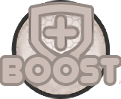
<style>
.page{position:relative;width:121px;height:99px;background:#ffffff}
.page>*{position:absolute;margin:0}
.t1{font:36px "Junegull";color:#cbbdb6}
</style>
<div class="page">
<p class="t1" style="left:2px;top:57px;width:118px;height:26px">BOOST</p>
</div>
